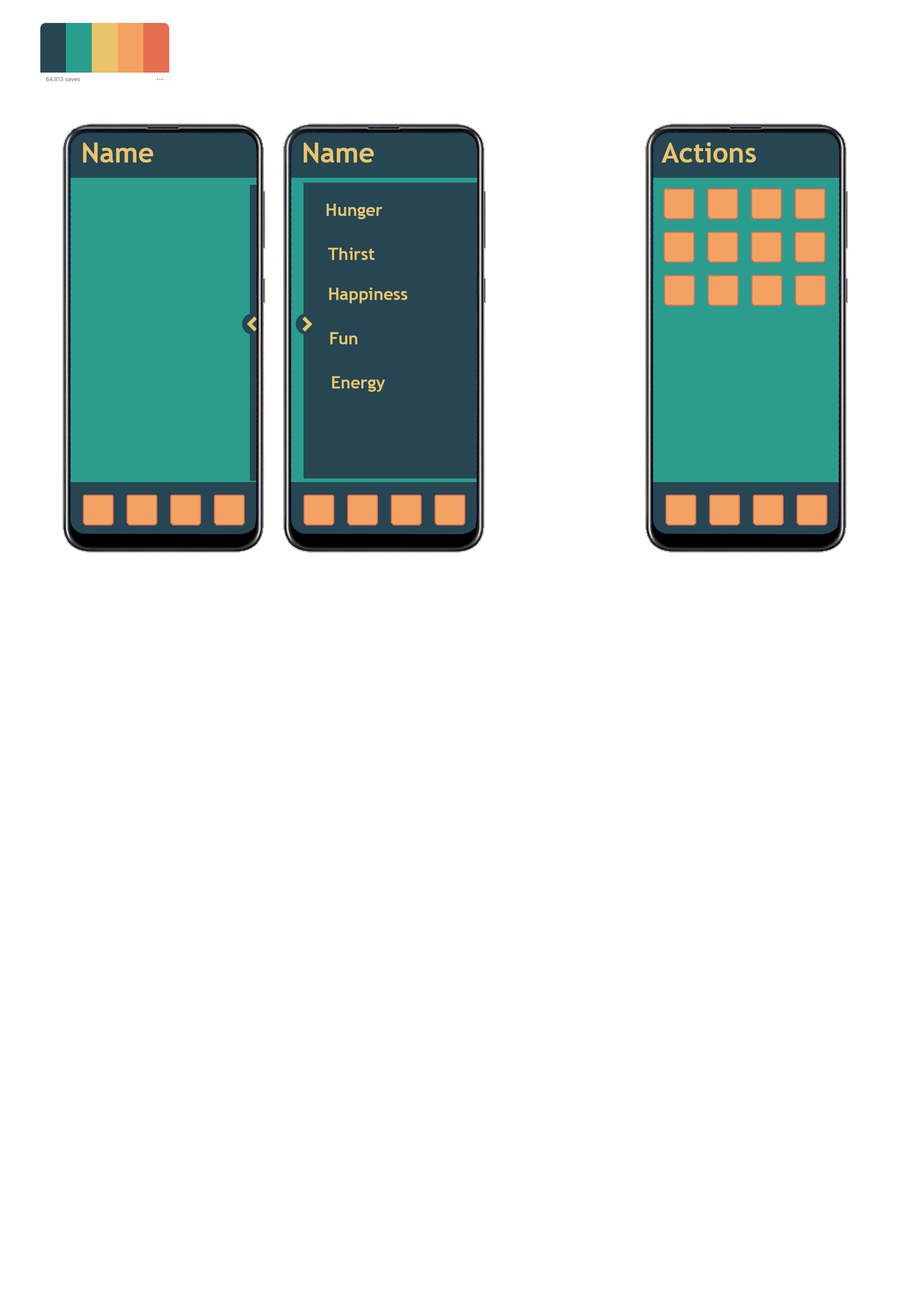
<style>
.page{position:relative;width:918px;height:1299px;background:#ffffff}
.page>*{position:absolute;margin:0}
.t1{font:27.8px "TrebuchetMS-Bold";color:#e9c46a}
.t2{font:17px "TrebuchetMS-Bold";color:#e9c46a}
</style>
<div class="page">
<p class="t1" style="left:83px;top:143px;width:70px;height:20px">Name</p>
<p class="t1" style="left:304px;top:143px;width:70px;height:20px">Name</p>
<p class="t1" style="left:662px;top:142px;width:94px;height:21px">Actions</p>
<p class="t2" style="left:327px;top:204px;width:56px;height:15px">Hunger</p>
<p class="t2" style="left:328px;top:247px;width:47px;height:13px">Thirst</p>
<p class="t2" style="left:329px;top:287px;width:79px;height:16px">Happiness</p>
<p class="t2" style="left:330px;top:332px;width:28px;height:12px">Fun</p>
<p class="t2" style="left:332px;top:376px;width:53px;height:16px">Energy</p>
</div>
